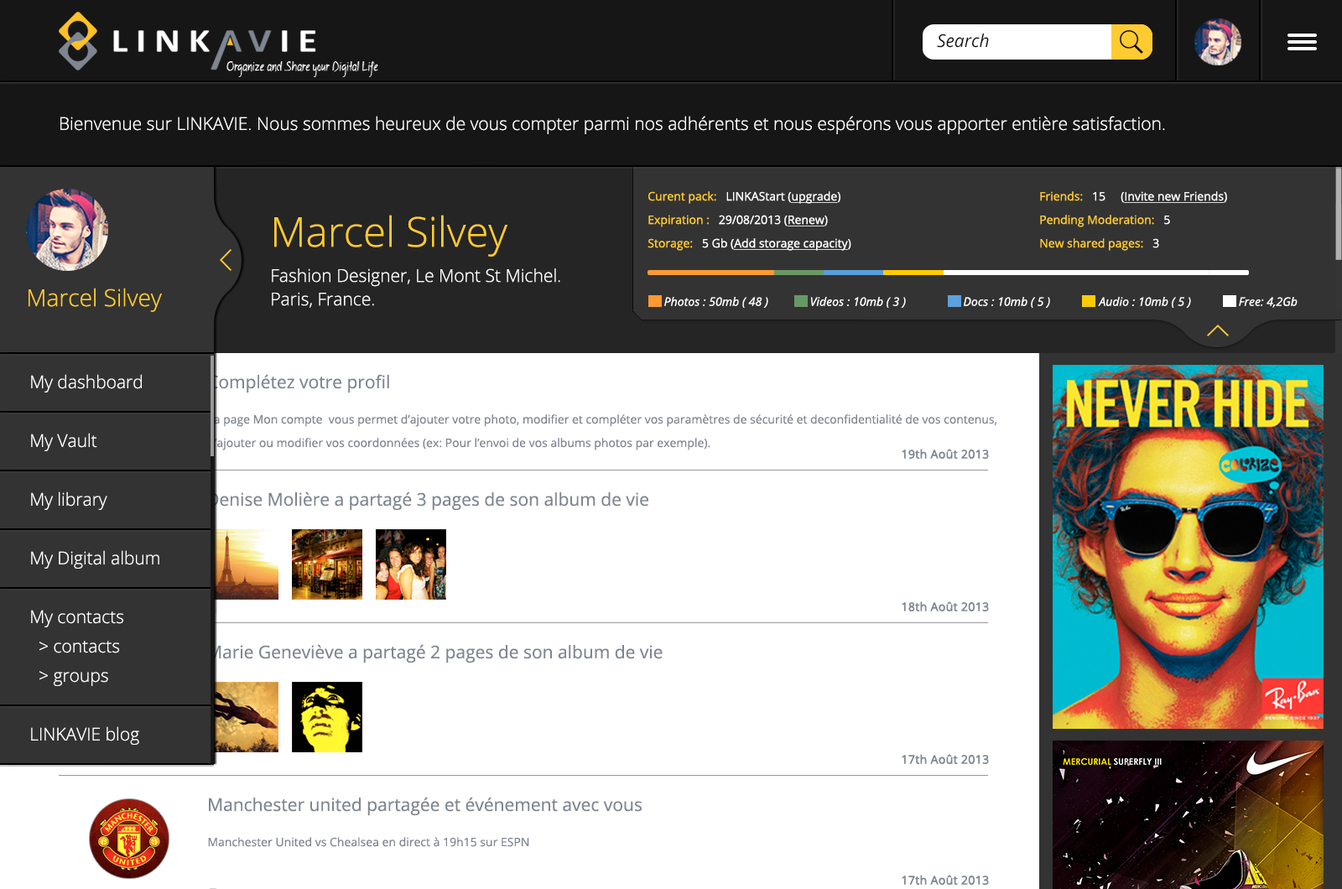
<style>
.page{position:relative;width:1342px;height:889px;background:#ffffff}
.page>*{position:absolute;margin:0}
.t1{font:17.6px "OpenSans-Italic";color:#121212}
.t2{font:17.6px "OpenSans-Light";color:#ffffff}
.t3{font:11.7px/11.7px "OpenSans";color:#ffffff;text-decoration:underline}
.t4{font:11.7px/11.7px "OpenSans";color:#ffcb30}
.t5{font:11.7px/11.7px "OpenSans";color:#ffffff}
.t6{font:17.6px/23.5px "OpenSans-Light";color:#ffffff}
.t7{font:41.1px/23.5px "OpenSans-Light";color:#ffcb30}
.t8{font:17.6px/35.2px "OpenSans-Light";color:#ffffff}
.t9{font:23.5px "OpenSans-Light";color:#ffcb30}
.t10{font:11.7px "OpenSans-Italic";color:#ffffff}
.t11{font:17.6px/29.3px "OpenSans-Light";color:#ffffff}
.t12{font:17.6px "OpenSans";color:#7f8692}
.t13{font:11.7px/23.5px "OpenSans";color:#7f8692}
.t14{font:11.7px "OpenSans";color:#7f8692;font-weight:bold}
.t15{font:11.7px "OpenSans";color:#7f8692}
</style>
<div class="page">
<p class="t1" style="left:937px;top:34px;width:52px;height:14px">Search</p>
<p class="t2" style="left:60px;top:116px;width:1105px;height:18px">Bienvenue sur LINKAVIE. Nous sommes heureux de vous compter parmi nos adhérents et nous espérons vous apporter entière satisfaction.</p>
<p class="t3" style="left:647px;top:191px;width:204px;height:60px"><span class="t4">Curent pack:</span><span class="t5">   LINKAStart (</span>upgrade<span class="t5">)<br><br></span><span class="t4">Expiration : </span><span class="t5">  29/08/2013 (</span>Renew<span class="t5">)<br><br></span><span class="t4">Storage:</span><span class="t5">   5 Gb (</span>Add storage capacity<span class="t5">)</span></p>
<p class="t4" style="left:1040px;top:191px;width:187px;height:60px">Friends:   <span class="t5">15     (</span><span class="t3">Invite new Friends</span><span class="t5">)<br></span><br>Pending Moderation:   <span class="t5">5<br></span><br>New shared pages:   <span class="t5">3</span></p>
<p class="t6" style="left:272px;top:215px;width:288px;height:93px"><span class="t7">Marcel Silvey<br></span><span class="t8">Fashio</span>n Designer, Le Mont St Michel.<br>Paris, France.</p>
<p class="t9" style="left:29px;top:288px;width:133px;height:24px">Marcel Silvey</p>
<p class="t10" style="left:664px;top:297px;width:104px;height:11px">Photos : 50mb ( 48 )</p>
<p class="t10" style="left:810px;top:297px;width:96px;height:11px">Videos : 10mb ( 3 )</p>
<p class="t10" style="left:963px;top:297px;width:87px;height:11px">Docs : 10mb ( 5 )</p>
<p class="t10" style="left:1098px;top:297px;width:93px;height:11px">Audio : 10mb ( 5 )</p>
<p class="t10" style="left:1238px;top:297px;width:59px;height:11px">Free: 4,2Gb</p>
<p class="t11" style="left:31px;top:374px;width:128px;height:371px">My dashboard<br><br>My Vault<br><br>My library<br><br>My Digital album <br><br>My contacts<br>  &gt; contacts<br>  &gt; groups<br> <br>LINKAVIE blog</p>
<p class="t12" style="left:208px;top:374px;width:181px;height:19px">Complétez votre profil</p>
<p class="t13" style="left:208px;top:414px;width:789px;height:36px">La page Mon compte  vous permet d’ajouter votre photo, modifier et compléter vos paramètres de sécurité et deconfidentialité de vos contenus,<br>d’ajouter ou modifier vos coordonnées (ex: Pour l’envoi de vos albums photos par exemple).</p>
<p class="t14" style="left:901px;top:449px;width:88px;height:10px">19th Août 2013</p>
<p class="t12" style="left:208px;top:491px;width:440px;height:20px">Denise Molière a partagé 3 pages de son album de vie</p>
<p class="t14" style="left:901px;top:601px;width:88px;height:10px">18th Août 2013</p>
<p class="t12" style="left:208px;top:644px;width:454px;height:19px">Marie Geneviève a partagé 2 pages de son album de vie</p>
<p class="t14" style="left:901px;top:754px;width:88px;height:10px">17th Août 2013</p>
<p class="t12" style="left:209px;top:797px;width:432px;height:19px">Manchester united partagée et événement avec vous</p>
<p class="t15" style="left:208px;top:837px;width:321px;height:10px">Manchester United vs Chealsea en direct à 19h15 sur ESPN</p>
<p class="t14" style="left:901px;top:875px;width:88px;height:10px">17th Août 2013</p>
</div>
